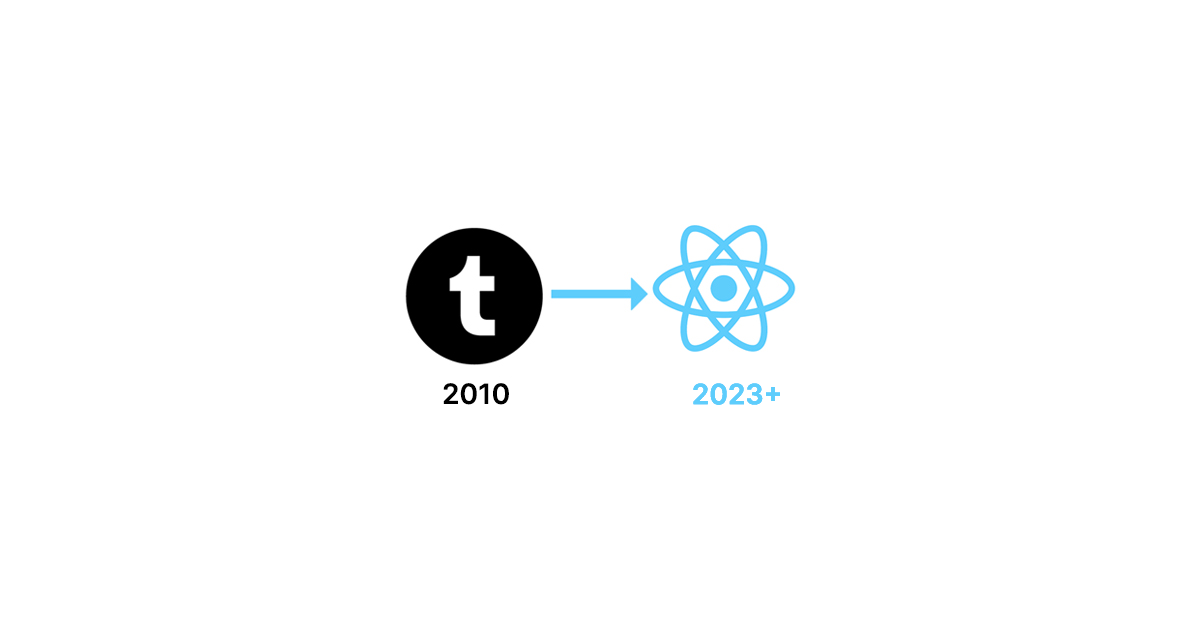
<style>
.page{position:relative;width:1200px;height:630px;background:#ffffff}
.page>*{position:absolute;margin:0}
.t1{font:28px "Inter-SemiBold";color:#000000}
.t2{font:28px "Inter-SemiBold";color:#5ecdfc}
</style>
<div class="page">
<p class="t1" style="left:443px;top:383px;width:66px;height:22px">2010</p>
<p class="t2" style="left:693px;top:383px;width:87px;height:22px">2023+</p>
<p class="t2" style="left:693px;top:383px;width:87px;height:22px">2023+</p>
<p class="t2" style="left:693px;top:383px;width:87px;height:22px">2023+</p>
</div>
